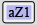
<style>
.page{position:relative;width:37px;height:25px;background:#b6b6f0}
.page>*{position:absolute;margin:0}
.t1{font:14px "TimesNewRomanPSMT";color:#000000}
</style>
<div class="page">
<p class="t1" style="left:8px;top:7px;width:21px;height:10px">aZ1</p>
</div>
